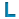
<style>
.page{position:relative;width:19px;height:19px;background:#ffffff}
.page>*{position:absolute;margin:0}
.t1{font:20px "Arial-BoldMT"}
</style>
<div class="page">
<p class="t1" style="left:5px;top:2px;width:11px;height:15px">L</p>
</div>
